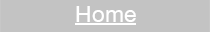
<style>
.page{position:relative;width:210px;height:32px;background:#c3c3c3}
.page>*{position:absolute;margin:0}
.t1{font:31.3px "Utsaah";color:#ffffff}
</style>
<div class="page">
<p class="t1" style="left:76px;top:6px;width:60px;height:16px">Home</p>
</div>
